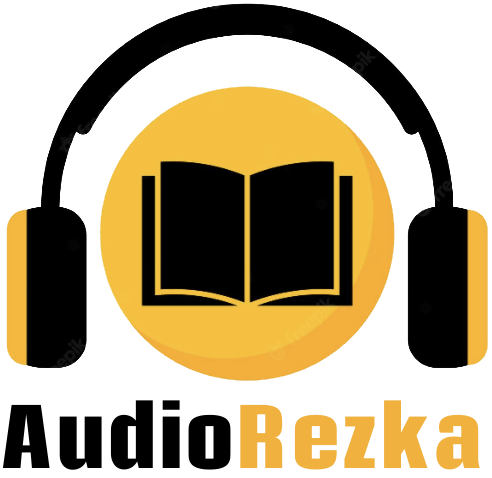
<style>
.page{position:relative;width:492px;height:478px;background:#ffffff}
.page>*{position:absolute;margin:0}
.t1{font:81px "CodaCaption-ExtraBold";color:#000000;scale:0.86 1}
.t2{font:81px "CodaCaption-ExtraBold";color:#f0b13e;scale:0.86 1}
</style>
<div class="page">
<p class="t1" style="left:2px;top:400px;width:478px;height:70px">Audio<span class="t2">Rezka</span></p>
</div>
